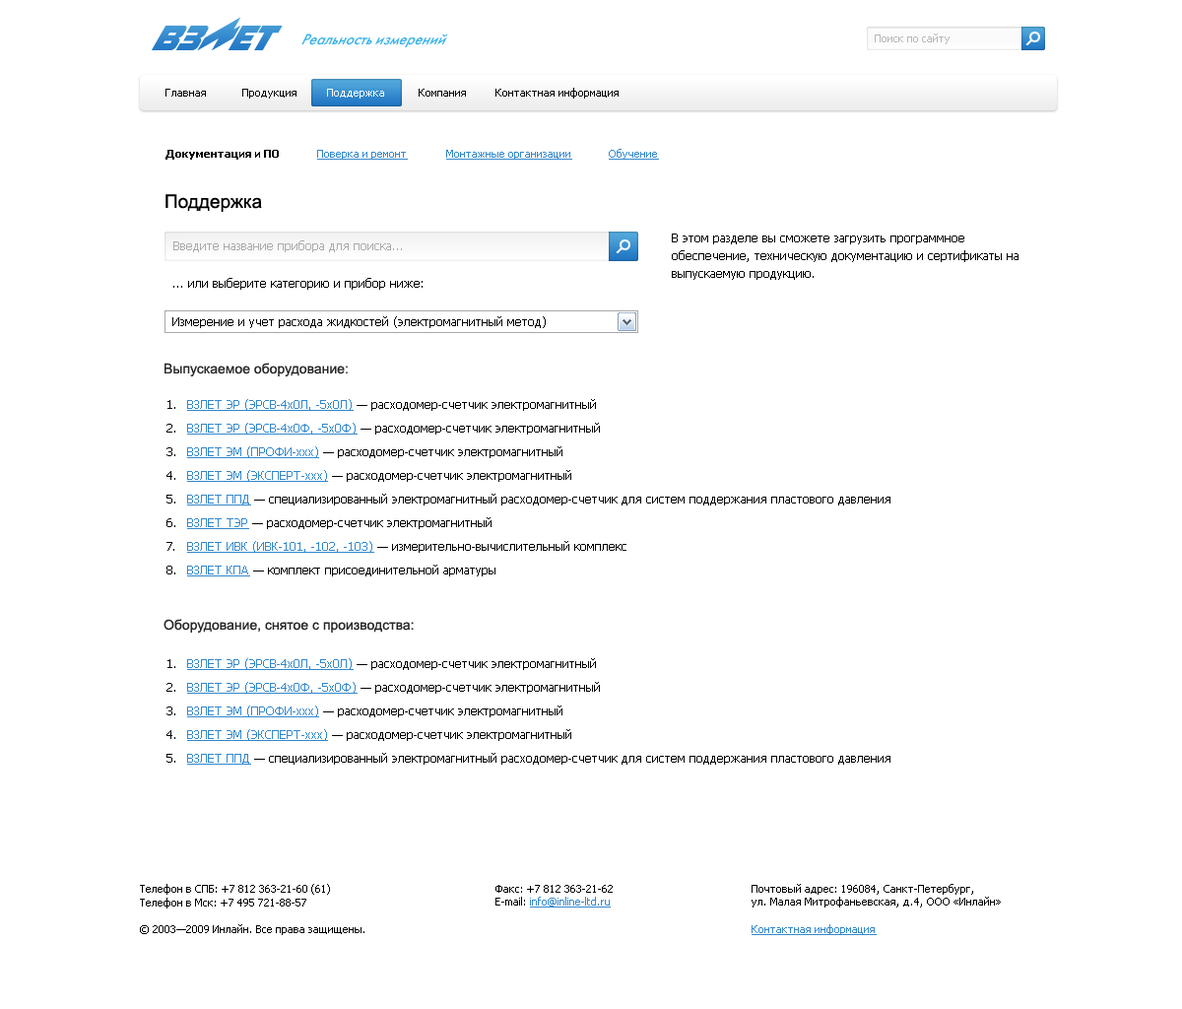
<style>
.page{position:relative;width:1182px;height:1009px;background:#ffffff}
.page>*{position:absolute;margin:0}
.t1{font:15.7px "FuturisC-Italic";color:#3cb3e8;scale:0.94 1}
.t2{font:10.8px "Tahoma";color:#b7b6b6}
.t3{font:10.8px "Tahoma";color:#000000}
.t4{font:10.8px "Tahoma";color:#ffffff}
.t5{font:10.8px "Tahoma-Bold";color:#000000}
.t6{font:10.8px "Tahoma";color:#3287cc;text-decoration:underline}
.t7{font:18.7px "ArialMT";color:#000000}
.t8{font:11.8px/17.7px "Tahoma";color:#000000}
.t9{font:11.8px "Tahoma";color:#aaaaaa}
.t10{font:11.8px "Tahoma";color:#000000}
.t11{font:13.8px "ArialMT";color:#272727}
.t12{font:11.8px/23.6px "Tahoma";color:#000000}
.t13{font:11.8px/23.6px "Tahoma";color:#3287cc;text-decoration:underline}
.t14{font:11.8px/19.7px "Tahoma";color:#000000}
.t15{font:14.8px "Arial-BoldMT";color:#000000}
</style>
<div class="page">
<p class="t1" style="left:301px;top:33px;width:147px;height:14px">Реальность измерений</p>
<p class="t2" style="left:875px;top:33px;width:75px;height:11px">Поиск по сайту</p>
<p class="t3" style="left:165px;top:89px;width:41px;height:8px">Главная</p>
<p class="t3" style="left:242px;top:89px;width:55px;height:10px">Продукция</p>
<p class="t4" style="left:327px;top:89px;width:57px;height:10px">Поддержка</p>
<p class="t3" style="left:419px;top:89px;width:47px;height:8px">Компания</p>
<p class="t3" style="left:496px;top:88px;width:123px;height:11px">Контактная информация</p>
<p class="t5" style="left:165px;top:150px;width:114px;height:10px">Документация и ПО</p>
<p class="t6" style="left:317px;top:150px;width:91px;height:10px">Поверка и ремонт</p>
<p class="t6" style="left:446px;top:150px;width:126px;height:10px">Монтажные организации</p>
<p class="t6" style="left:609px;top:149px;width:50px;height:11px">Обучение</p>
<p class="t7" style="left:165px;top:194px;width:97px;height:18px">Поддержка</p>
<p class="t8" style="left:672px;top:233px;width:347px;height:47px">В этом разделе вы сможете загрузить программное обеспечение, техническую документацию и сертификаты на выпускаемую продукцию.</p>
<p class="t9" style="left:173px;top:240px;width:229px;height:12px">Введите название прибора для поиска...</p>
<p class="t10" style="left:173px;top:278px;width:250px;height:12px">... или выберите категорию и прибор ниже:</p>
<p class="t10" style="left:172px;top:316px;width:374px;height:12px">Измерение и учет расхода жидкостей (электромагнитный метод)</p>
<p class="t11" style="left:165px;top:363px;width:183px;height:13px">Выпускаемое оборудование:</p>
<p class="t12" style="left:166px;top:400px;width:9px;height:174px">1.<br>2.<br>3.<br>4.<br>5.<br>6.<br>7.<br>8.</p>
<p class="t12" style="left:187px;top:399px;width:704px;height:177px"><span class="t13">ВЗЛЕТ ЭР (ЭРСВ-4х0Л, -5х0Л)</span> — расходомер-счетчик электромагнитный<br><span class="t13">ВЗЛЕТ ЭР (ЭРСВ-4х0Ф, -5х0Ф)</span> — расходомер-счетчик электромагнитный<br><span class="t13">ВЗЛЕТ ЭМ (ПРОФИ-xxx)</span><span class="t14"> — р</span>асходомер-счетчик электромагнитный<br><span class="t13">ВЗЛЕТ ЭМ (ЭКСПЕРТ-xxx)</span><span class="t14"> — р</span>асходомер-счетчик электромагнитный<br><span class="t13">ВЗЛЕТ ППД</span><span class="t14"> — с</span>пециализированный электромагнитный расходомер-счетчик для систем поддержания пластового давления<br><span class="t13">ВЗЛЕТ ТЭР</span><span class="t14"> — р</span>асходомер-счетчик электромагнитный<br><span class="t13">ВЗЛЕТ ИВК (ИВК-101, -102, -103)</span><span class="t14"> — и</span>змерительно-вычислительный комплекс<br><span class="t13">ВЗЛЕТ КПА</span><span class="t14"> — к</span>омплект присоединительной арматуры</p>
<p class="t11" style="left:164px;top:619px;width:250px;height:13px">Оборудование, снятое с производства:</p>
<p class="t12" style="left:166px;top:659px;width:9px;height:103px">1.<br>2.<br>3.<br>4.<br>5.</p>
<p class="t12" style="left:187px;top:658px;width:704px;height:106px"><span class="t13">ВЗЛЕТ ЭР (ЭРСВ-4х0Л, -5х0Л)</span> — расходомер-счетчик электромагнитный<br><span class="t13">ВЗЛЕТ ЭР (ЭРСВ-4х0Ф, -5х0Ф)</span> — расходомер-счетчик электромагнитный<br><span class="t13">ВЗЛЕТ ЭМ (ПРОФИ-xxx)</span><span class="t14"> — р</span>асходомер-счетчик электромагнитный<br><span class="t13">ВЗЛЕТ ЭМ (ЭКСПЕРТ-xxx)</span><span class="t14"> — р</span>асходомер-счетчик электромагнитный<br><span class="t13">ВЗЛЕТ ППД</span><span class="t14"> — с</span>пециализированный электромагнитный расходомер-счетчик для систем поддержания пластового давления<br><span class="t13">ВЗЛЕТ ТЭР</span><span class="t14"> — р</span>асходомер-счетчик электромагнитный<br><span class="t13">ВЗЛЕТ ИВК (ИВК-101, -102, -103)</span><span class="t14"> — и</span>змерительно-вычислительный комплекс<br><span class="t13">ВЗЛЕТ КПА</span><span class="t14"> — к</span>омплект присоединительной арматуры</p>
<p class="t3" style="left:140px;top:884px;width:190px;height:24px">Телефон в СПБ: +7 812 363-21-60 (61)<br>Телефон в Мск: +7 495 721-88-57</p>
<p class="t3" style="left:496px;top:885px;width:117px;height:22px"><span class="t15"><br><br></span>Факс: +7 812 363-21-62<br>E-mail: <span class="t6">info@inline-ltd.ru</span></p>
<p class="t3" style="left:752px;top:884px;width:249px;height:23px"><span class="t15"><br><br></span>Почтовый адрес: 196084, Санкт-Петербург,<br>ул. Малая Митрофаньевская, д.4, ООО «Инлайн»</p>
<p class="t3" style="left:140px;top:924px;width:224px;height:11px">© 2003—2009 Инлайн. Все права защищены.</p>
<p class="t6" style="left:752px;top:924px;width:125px;height:11px">Контактная информация</p>
</div>
